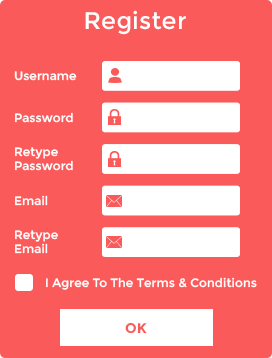
<style>
.page{position:relative;width:272px;height:358px;background:#fb5a5a}
.page>*{position:absolute;margin:0}
.t1{font:24px "Montserrat-Regular";letter-spacing:0.01em;color:#ffffff}
.t2{font:12px "Montserrat-Regular";letter-spacing:0.01em;color:#ffffff}
.t3{font:12px/14px "Montserrat-Regular";letter-spacing:0.01em;color:#ffffff}
.t4{font:14px "Montserrat-Bold";letter-spacing:0.01em;color:#fb5a5a}
</style>
<div class="page">
<p class="t1" style="left:85px;top:10px;width:101px;height:25px">Register</p>
<p class="t2" style="left:14px;top:71px;width:63px;height:10px">Username</p>
<p class="t2" style="left:15px;top:112px;width:58px;height:11px">Password</p>
<p class="t3" style="left:15px;top:147px;width:58px;height:24px">Retype <br>Password</p>
<p class="t2" style="left:15px;top:195px;width:33px;height:11px">Email</p>
<p class="t3" style="left:15px;top:230px;width:43px;height:24px">Retype <br>Email</p>
<p class="t2" style="left:46px;top:277px;width:211px;height:13px">I Agree To The Terms &amp; Conditions</p>
<p class="t4" style="left:125px;top:322px;width:22px;height:12px">OK</p>
</div>
